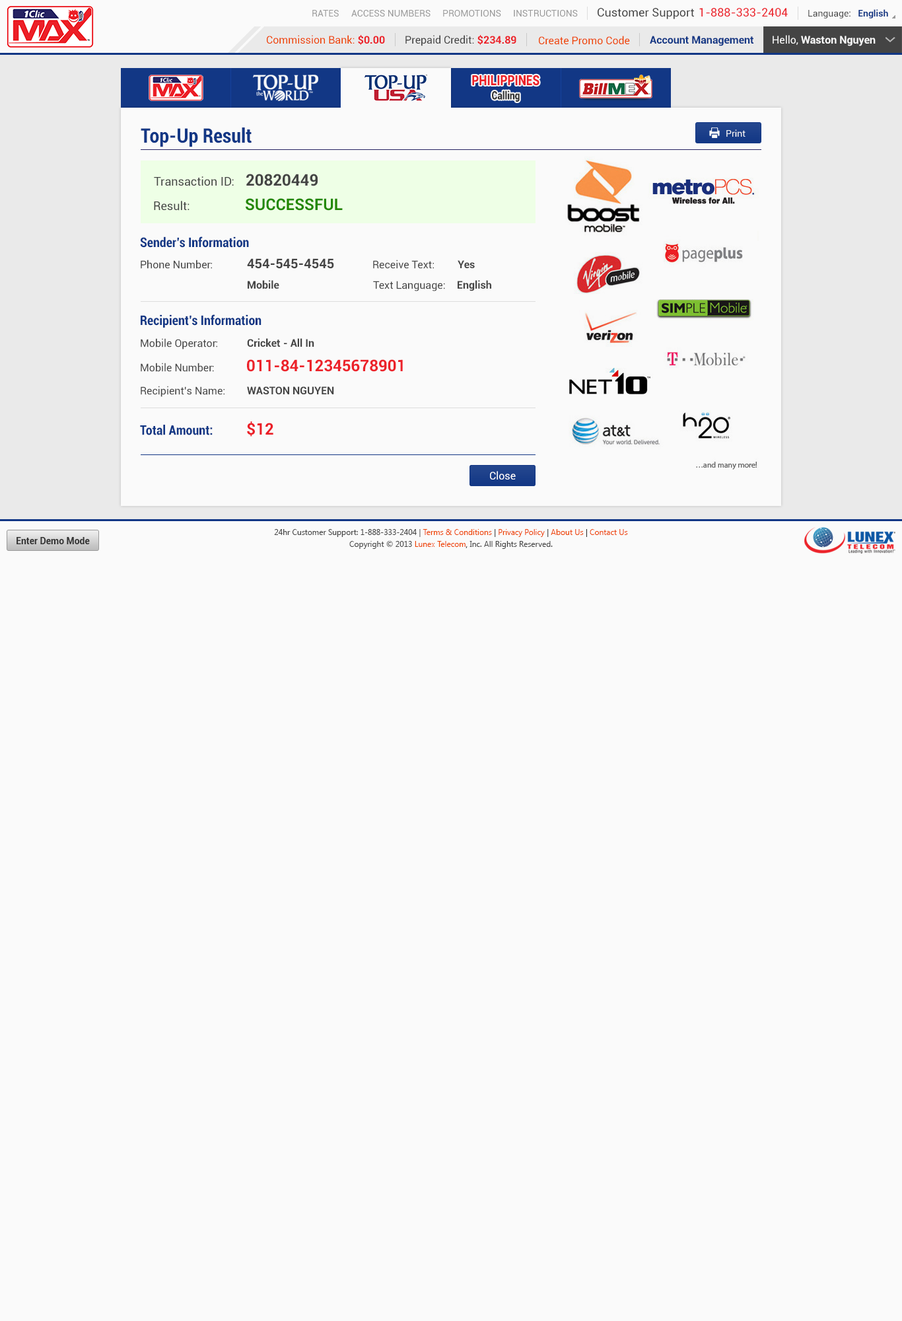
<style>
.page{position:relative;width:902px;height:1321px;background:#fafafa}
.page>*{position:absolute;margin:0}
.t1{font:9.2px "Roboto-Regular";color:#999999}
.t2{font:11.6px "Roboto-Regular";color:#444444}
.t3{font:11.6px "Roboto-Regular";color:#ec2029}
.t4{font:9.2px "Roboto-Regular";color:#444444}
.t5{font:9.2px "Roboto-Bold";color:#123785}
.t6{font:10.6px "Roboto-Regular";color:#ee4400}
.t7{font:10.6px "Roboto-Bold";color:#ec2028}
.t8{font:10.6px "Roboto-Regular";color:#444444}
.t9{font:10.6px "Roboto-Bold";color:#123785}
.t10{font:10.6px "Roboto-Bold";color:#fafafa}
.t11{font:10.6px "Roboto-Regular";color:#fafafa}
.t12{font:14.1px "Roboto-Black";color:#ec2028;scale:0.81 1}
.t13{font:11.3px "Roboto-Black";color:#333333;scale:0.81 1}
.t14{font:19.8px "Roboto-BoldCondensed";color:#123785}
.t15{font:9.2px "Roboto-Regular";color:#fafafa}
.t16{font:15.9px "Roboto-Bold";color:#444444}
.t17{font:11.9px "Roboto-Regular";color:#444444}
.t18{font:15.9px "Roboto-Bold";color:#228800}
.t19{font:13.2px "Roboto-BoldCondensed";color:#123785}
.t20{font:13.2px "Roboto-Bold";color:#444444}
.t21{font:10.6px "Roboto-Bold";color:#444444}
.t22{font:15.9px "Roboto-Bold";color:#ec222a}
.t23{font:15.9px "Roboto-Bold";color:#eb1e27}
.t24{font:10.6px "Roboto-Regular";color:#ffffff}
.t25{font:7.9px/11.9px "SegoeUI";color:#444444}
.t26{font:7.9px/11.9px "SegoeUI";color:#ee4400}
.t27{font:7.9px/11.9px "SegoeUI";color:#333333}
.t28{font:9.2px "Roboto-Bold";color:#333333}
</style>
<div class="page">
<p class="t1" style="left:312px;top:10px;width:27px;height:7px">RATES</p>
<p class="t1" style="left:351px;top:10px;width:80px;height:7px">ACCESS NUMBERS</p>
<p class="t1" style="left:443px;top:10px;width:58px;height:7px">PROMOTIONS</p>
<p class="t1" style="left:514px;top:10px;width:64px;height:7px">INSTRUCTIONS</p>
<p class="t2" style="left:598px;top:8px;width:96px;height:11px">Customer Support</p>
<p class="t3" style="left:700px;top:8px;width:88px;height:9px">1-888-333-2404</p>
<p class="t4" style="left:809px;top:9px;width:80px;height:9px">Language:   <span class="t5">English</span></p>
<p class="t6" style="left:267px;top:35px;width:118px;height:10px">Commission Bank: <span class="t7">$0.00</span></p>
<p class="t8" style="left:406px;top:35px;width:111px;height:11px">Prepaid Credit: <span class="t7">$234.89</span></p>
<p class="t6" style="left:539px;top:36px;width:91px;height:9px">Create Promo Code</p>
<p class="t9" style="left:650px;top:36px;width:104px;height:10px">Account Management</p>
<p class="t10" style="left:773px;top:35px;width:103px;height:11px"><span class="t11">Hello, </span>Waston Nguyen</p>
<p class="t12" style="left:472px;top:75px;width:68px;height:11px">PHILIPPINES</p>
<p class="t13" style="left:492px;top:91px;width:28px;height:11px">Calling</p>
<p class="t14" style="left:141px;top:128px;width:111px;height:19px">Top-Up Result</p>
<p class="t15" style="left:727px;top:129px;width:19px;height:8px">Print</p>
<p class="t16" style="left:246px;top:174px;width:72px;height:12px">20820449</p>
<p class="t17" style="left:154px;top:176px;width:80px;height:10px">Transaction ID:</p>
<p class="t17" style="left:154px;top:201px;width:36px;height:10px">Result:</p>
<p class="t18" style="left:246px;top:198px;width:97px;height:13px">SUCCESSFUL</p>
<p class="t19" style="left:140px;top:237px;width:109px;height:11px">Sender’s Information</p>
<p class="t8" style="left:141px;top:260px;width:71px;height:9px">Phone Number:</p>
<p class="t20" style="left:247px;top:258px;width:87px;height:11px">454-545-4545</p>
<p class="t8" style="left:373px;top:260px;width:61px;height:9px">Receive Text:</p>
<p class="t21" style="left:458px;top:260px;width:17px;height:8px">Yes</p>
<p class="t21" style="left:248px;top:280px;width:31px;height:9px">Mobile</p>
<p class="t8" style="left:373px;top:281px;width:72px;height:10px">Text Language:</p>
<p class="t21" style="left:458px;top:280px;width:34px;height:11px">English</p>
<p class="t19" style="left:141px;top:314px;width:121px;height:14px">Recipient’s Information</p>
<p class="t8" style="left:141px;top:338px;width:76px;height:11px">Mobile Operator:</p>
<p class="t21" style="left:247px;top:338px;width:67px;height:9px">Cricket - All In</p>
<p class="t8" style="left:141px;top:363px;width:73px;height:9px">Mobile Number:</p>
<p class="t22" style="left:247px;top:359px;width:156px;height:13px">011-84-12345678901</p>
<p class="t8" style="left:141px;top:386px;width:84px;height:11px">Recipient’s Name:</p>
<p class="t21" style="left:247px;top:386px;width:87px;height:8px">WASTON NGUYEN</p>
<p class="t19" style="left:140px;top:425px;width:73px;height:10px">Total Amount:</p>
<p class="t23" style="left:247px;top:421px;width:27px;height:16px">$12</p>
<p class="t24" style="left:490px;top:471px;width:26px;height:9px">Close</p>
<p class="t25" style="left:274px;top:529px;width:354px;height:20px;text-align:center">24hr Customer Support: 1-888-333-2404 | <span class="t26">Terms &amp; Conditions</span><span class="t27"> | </span><span class="t26">Privacy Policy</span><span class="t27"> | </span><span class="t26">About Us</span><span class="t27"> | </span><span class="t26">Contact Us<br></span>Copyright © 2013 <span class="t26">Lunex Telecom</span><span class="t27">,</span> Inc. All Rights Reserved.</p>
<p class="t28" style="left:17px;top:537px;width:73px;height:7px">Enter Demo Mode</p>
</div>
